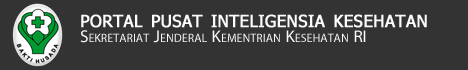
<style>
.page{position:relative;width:468px;height:70px;background:#333333}
.page>*{position:absolute;margin:0}
.t1{font:24px "Tahoma";color:#fdfbfb;font-variant:small-caps;font-weight:bold}
.t2{font:24px "MyriadArabic-Regular";color:#fcfafa;font-variant:small-caps}
</style>
<div class="page">
<p class="t1" style="left:81px;top:14px;width:346px;height:14px">portal pusat inteligensia kesehatan</p>
<p class="t2" style="left:80px;top:30px;width:286px;height:13px">Sekretariat Jenderal Kementrian Kesehatan RI</p>
</div>
